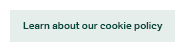
<style>
.page{position:relative;width:185px;height:42px;background:#e6eeeb}
.page>*{position:absolute;margin:0}
.t1{font:10px "AktivGrotesk-Medium";letter-spacing:0.005em;color:#03483a}
</style>
<div class="page">
<p class="t1" style="left:23px;top:22px;width:140px;height:9px">Learn about our cookie policy</p>
</div>
